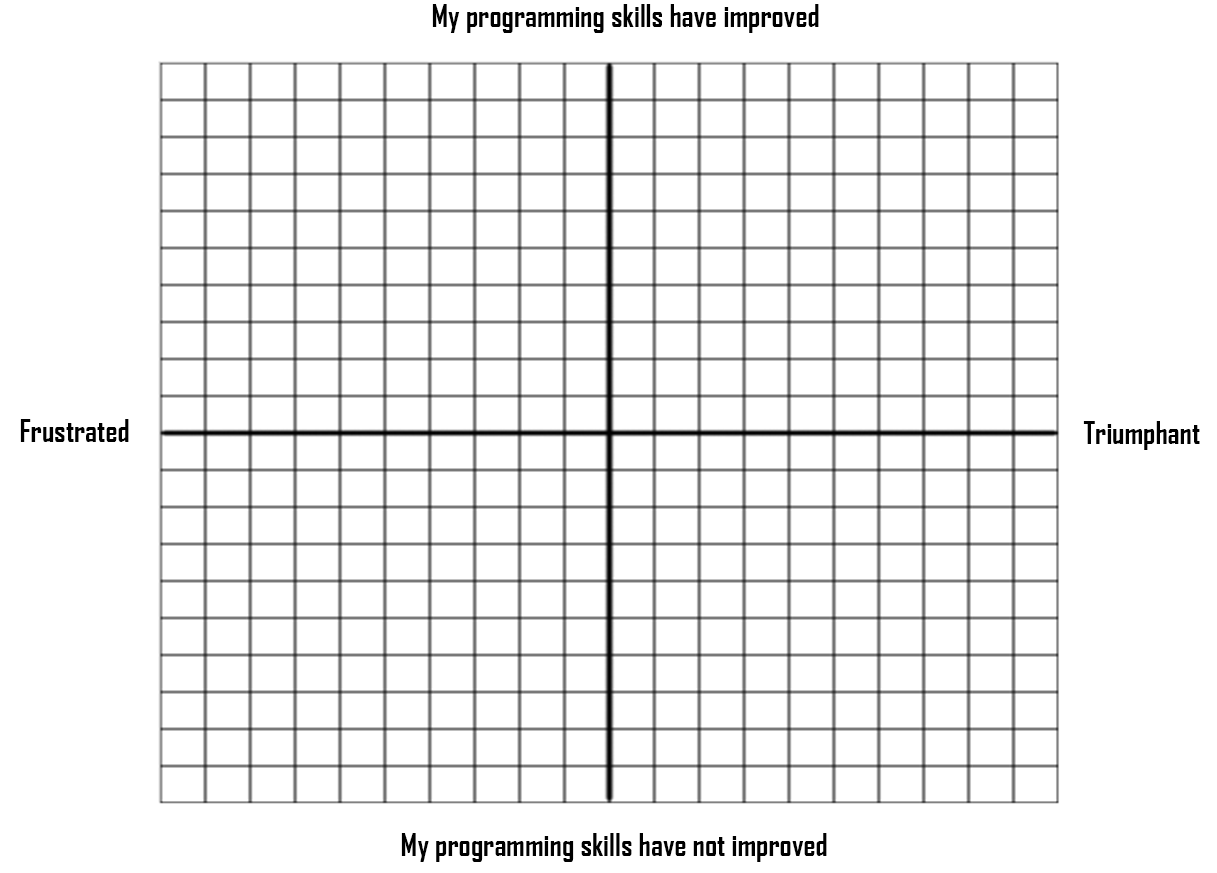
<style>
.page{position:relative;width:1217px;height:873px;background:#ffffff}
.page>*{position:absolute;margin:0}
.t1{font:30px "AgencyFB-Bold";color:#000000}
</style>
<div class="page">
<p class="t1" style="left:432px;top:4px;width:387px;height:29px">My programming skills have improved</p>
<p class="t1" style="left:20px;top:419px;width:109px;height:23px">Frustrated</p>
<p class="t1" style="left:1083px;top:421px;width:117px;height:29px">Triumphant</p>
<p class="t1" style="left:401px;top:833px;width:426px;height:29px">My programming skills have not improved</p>
</div>
